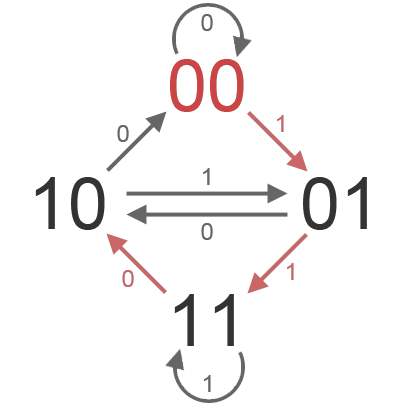
<style>
.page{position:relative;width:410px;height:410px;background:#ffffff}
.page>*{position:absolute;margin:0}
.t1{font:24px "ArialMT";color:#666666}
.t2{font:72px "ArialMT";color:#cc4444}
.t3{font:24px "ArialMT";color:#cc6666}
.t4{font:72px "ArialMT";color:#333333}
</style>
<div class="page">
<p class="t1" style="left:201px;top:14px;width:12px;height:17px">0</p>
<p class="t2" style="left:170px;top:59px;width:74px;height:53px">00</p>
<p class="t1" style="left:117px;top:125px;width:12px;height:17px">0</p>
<p class="t3" style="left:277px;top:115px;width:7px;height:17px">1</p>
<p class="t1" style="left:203px;top:168px;width:7px;height:17px">1</p>
<p class="t4" style="left:35px;top:177px;width:70px;height:53px">10</p>
<p class="t4" style="left:303px;top:177px;width:64px;height:53px">01</p>
<p class="t1" style="left:201px;top:223px;width:12px;height:17px">0</p>
<p class="t3" style="left:122px;top:270px;width:12px;height:17px">0</p>
<p class="t3" style="left:287px;top:263px;width:7px;height:17px">1</p>
<p class="t4" style="left:174px;top:294px;width:60px;height:52px">11</p>
<p class="t1" style="left:204px;top:375px;width:7px;height:17px">1</p>
</div>
